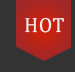
<style>
.page{position:relative;width:75px;height:72px;background:#333333}
.page>*{position:absolute;margin:0}
.t1{font:20.6px "Cambria";letter-spacing:0.022em;color:#f2eded}
</style>
<div class="page">
<p class="t1" style="left:25px;top:17px;width:39px;height:16px">HOT</p>
</div>
